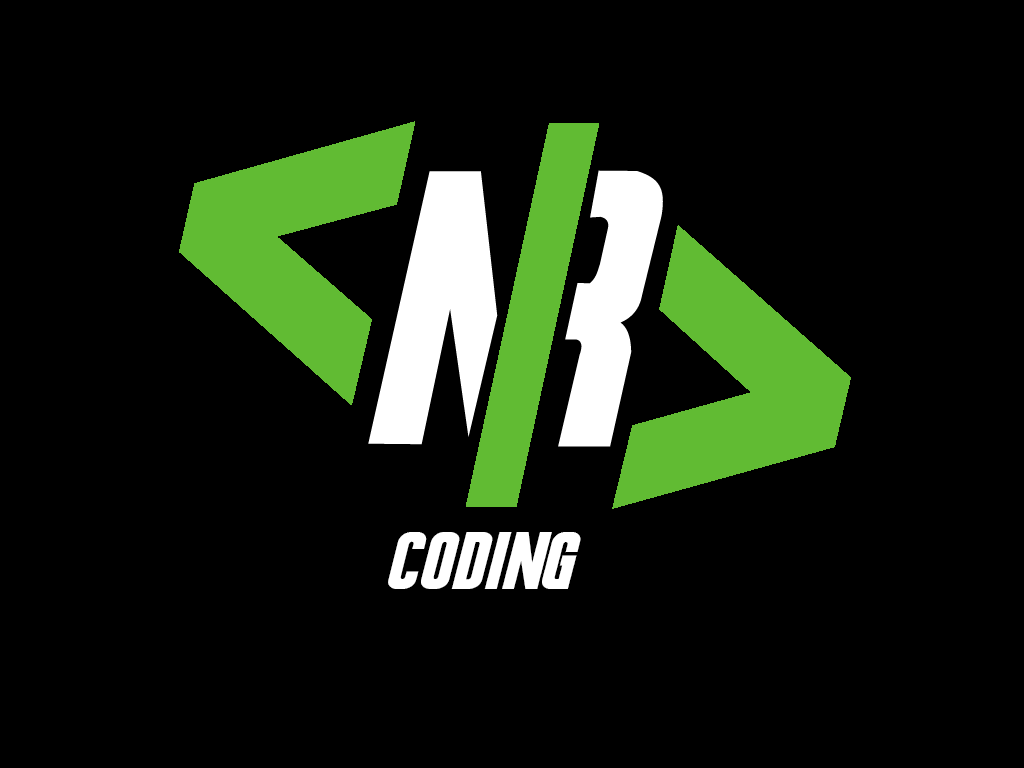
<style>
.page{position:relative;width:1024px;height:768px;background:#000000}
.page>*{position:absolute;margin:0}
.t1{font:80px "UraeNium";color:#ffffff;scale:1.13 1}
</style>
<div class="page">
<p class="t1" style="left:388px;top:532px;width:193px;height:57px">CODing</p>
</div>
